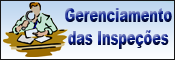
<style>
.page{position:relative;width:175px;height:60px}
.page>*{position:absolute;margin:0}
.t1{font:18.9px "Arial-Black";scale:0.68 1}
</style>
<div class="page">
<p class="t1" style="left:65px;top:8px;width:107px;height:41px;text-align:center">Gerenciamento<br>das Inspeções</p>
</div>
